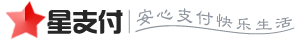
<style>
.page{position:relative;width:306px;height:44px;background:#ffffff}
.page>*{position:absolute;margin:0}
.t1{font:25.6px "hzgb";color:#262626}
.t2{font:18px "JLiBian";letter-spacing:0.1em;color:#8f969f;text-decoration:underline}
</style>
<div class="page">
<p class="t1" style="left:47px;top:10px;width:76px;height:24px">星支付</p>
<p class="t2" style="left:135px;top:8px;width:160px;height:27px">安心支付快乐生活</p>
</div>
